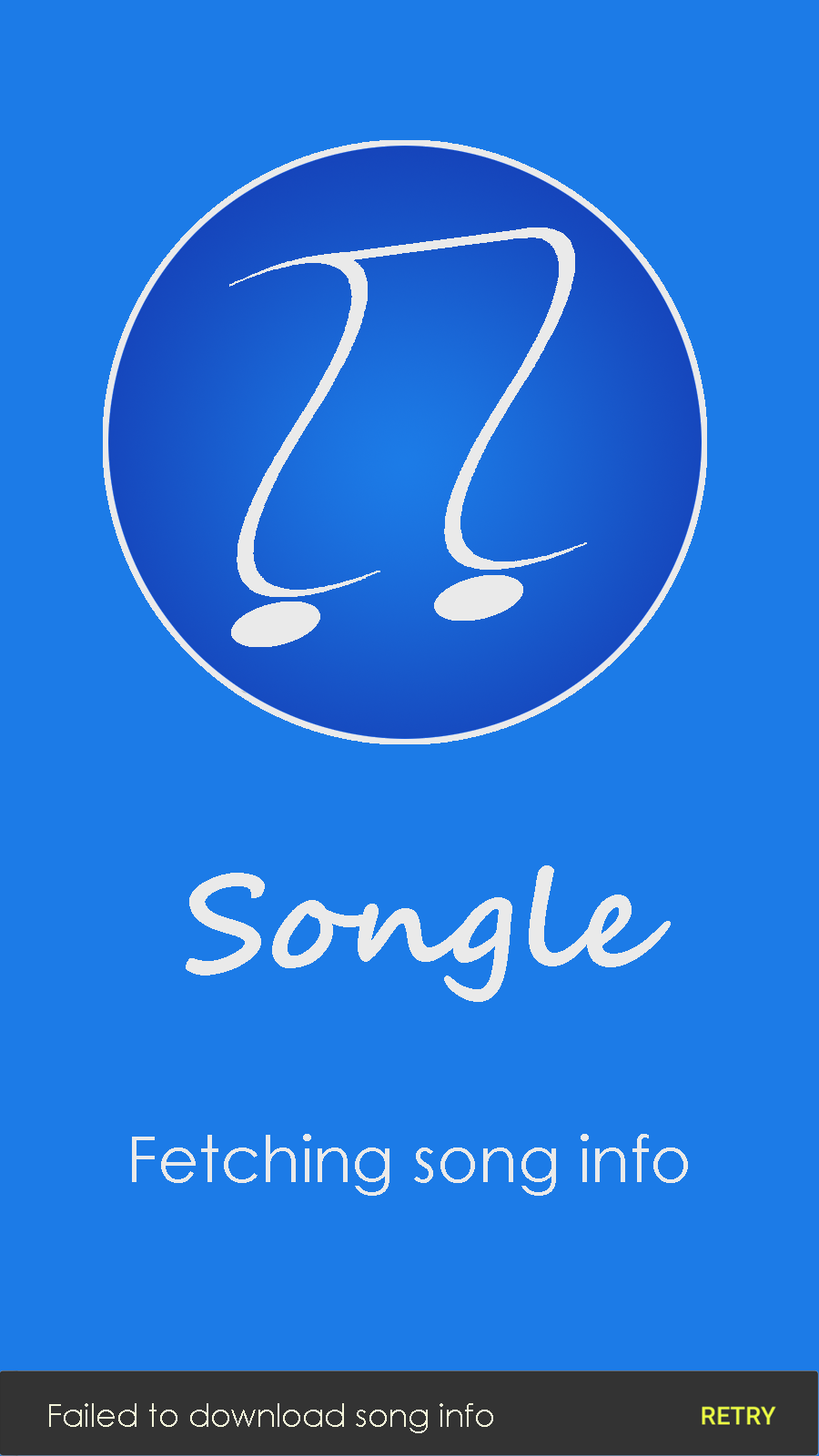
<style>
.page{position:relative;width:819px;height:1456px;background:#1c7be7}
.page>*{position:absolute;margin:0}
.t1{font:136.5px "SegoeScript-Bold";color:#eaeaea}
.t2{font:63.7px "CenturyGothic";color:#eaeaea}
.t3{font:31.8px "CenturyGothic";color:#f2f3d9}
</style>
<div class="page">
<p class="t1" style="left:186px;top:865px;width:485px;height:137px">Songle</p>
<p class="t2" style="left:132px;top:1134px;width:556px;height:62px">Fetching song info</p>
<p class="t3" style="left:49px;top:1403px;width:444px;height:30px">Failed to download song info</p>
</div>
